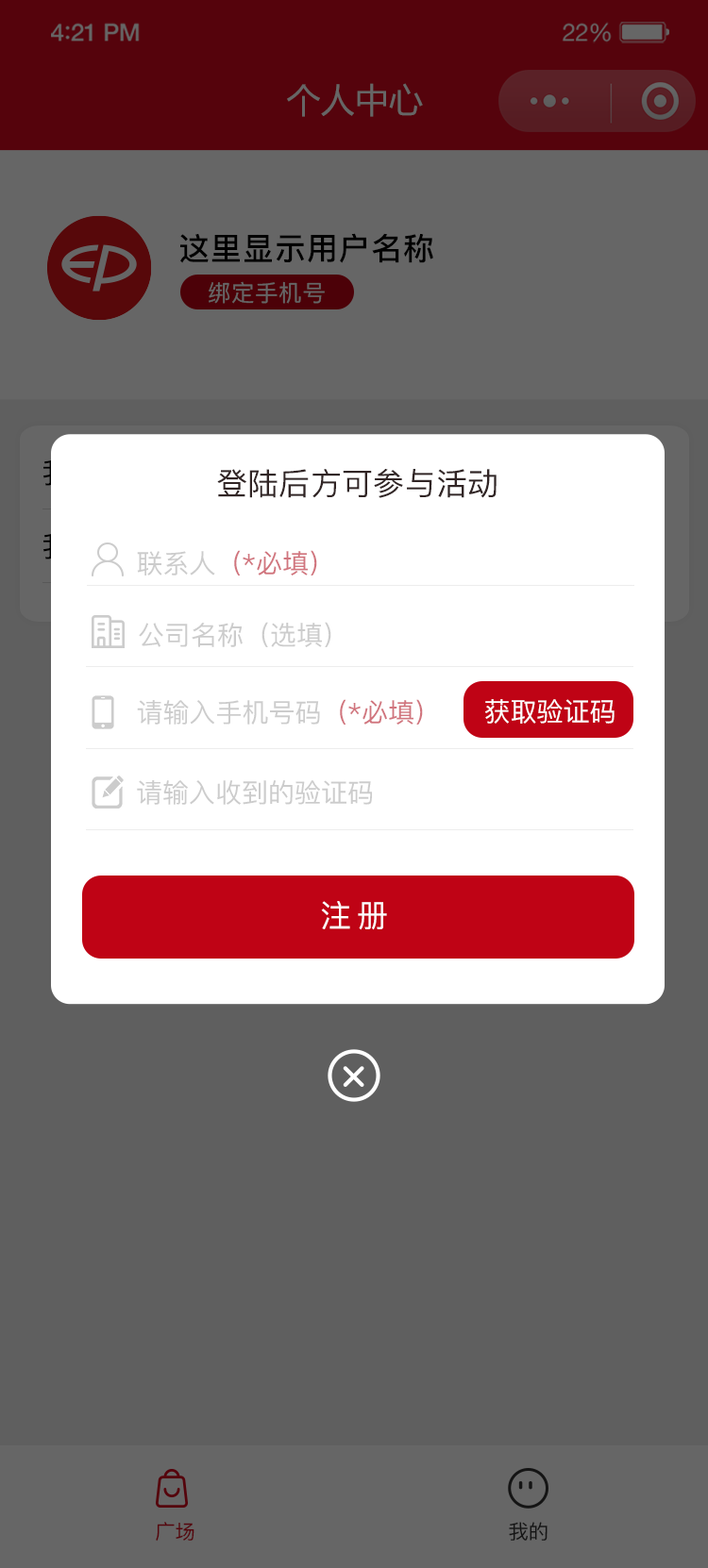
<style>
.page{position:relative;width:708px;height:1568px;background:#5f5f5f}
.page>*{position:absolute;margin:0}
.t1{font:34.1px "MicrosoftYaHei";color:#666666}
.t2{font:31.1px "PingFang-SC-Bold";letter-spacing:0.031em;color:#000000}
.t3{font:23px "PingFang-SC-Medium";letter-spacing:0.031em;color:#666666}
.t4{font:31.1px "PingFang-SC-Medium";letter-spacing:0.01em;color:#312525}
.t5{font:26.4px "PingFang-SC-Medium";color:#d1757e}
.t6{font:26.4px "PingFang-SC-Medium";color:#cccccc}
.t7{font:26.4px "PingFang-SC-Medium";color:#ffffff}
.t8{font:31.1px "PingFang-SC-Medium";letter-spacing:0.2em;color:#ffffff}
.t9{font:20.2px "PingFang-SC-Medium";color:#55040c}
.t10{font:20.2px "PingFang-SC-Medium";color:#141414}
</style>
<div class="page">
<p class="t1" style="left:287px;top:83px;width:136px;height:34px">个人中心</p>
<p class="t2" style="left:180px;top:233px;width:253px;height:30px">这里显示用户名称</p>
<p class="t3" style="left:209px;top:281px;width:116px;height:23px">绑定手机号</p>
<p class="t4" style="left:217px;top:469px;width:279px;height:29px">登陆后方可参与活动</p>
<p class="t5" style="left:137px;top:550px;width:180px;height:25px"><span class="t6">联系人</span>（*必填）</p>
<p class="t6" style="left:139px;top:622px;width:192px;height:25px">公司名称（选填）</p>
<p class="t6" style="left:137px;top:699px;width:286px;height:26px">请输入手机号码<span class="t5">（*必填）</span></p>
<p class="t7" style="left:485px;top:699px;width:129px;height:25px">获取验证码</p>
<p class="t6" style="left:137px;top:780px;width:235px;height:25px">请输入收到的验证码</p>
<p class="t8" style="left:321px;top:901px;width:66px;height:29px">注册</p>
<p class="t9" style="left:156px;top:1522px;width:38px;height:20px">广场</p>
<p class="t10" style="left:509px;top:1522px;width:38px;height:19px">我的</p>
</div>
